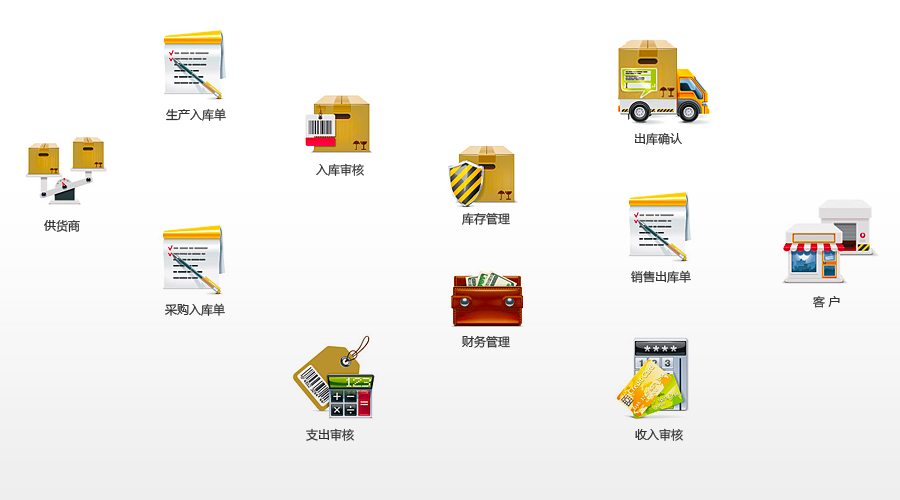
<style>
.page{position:relative;width:900px;height:500px;background:#ffffff}
.page>*{position:absolute;margin:0}
.t1{font:12px "MicrosoftYaHei";color:#333333}
</style>
<div class="page">
<p class="t1" style="left:166px;top:108px;width:60px;height:13px">生产入库单</p>
<p class="t1" style="left:635px;top:132px;width:47px;height:13px">出库确认</p>
<p class="t1" style="left:316px;top:163px;width:48px;height:13px">入库审核</p>
<p class="t1" style="left:44px;top:220px;width:36px;height:12px">供货商</p>
<p class="t1" style="left:462px;top:212px;width:48px;height:13px">库存管理</p>
<p class="t1" style="left:631px;top:270px;width:60px;height:13px">销售出库单</p>
<p class="t1" style="left:165px;top:303px;width:60px;height:13px">采购入库单</p>
<p class="t1" style="left:813px;top:296px;width:27px;height:12px">客 户</p>
<p class="t1" style="left:462px;top:335px;width:48px;height:13px">财务管理</p>
<p class="t1" style="left:306px;top:428px;width:48px;height:13px">支出审核</p>
<p class="t1" style="left:635px;top:428px;width:48px;height:13px">收入审核</p>
</div>
